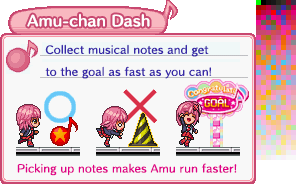
<style>
.page{position:relative;width:296px;height:192px;background:#f8f8f8}
.page>*{position:absolute;margin:0}
.t1{font:14px "HummingStd-B";letter-spacing:0.02em;color:#ffffff}
.t2{font:10px/22px "HummingStd-D";letter-spacing:0.02em;color:#3828a8}
.t3{font:10px "HummingStd-D";letter-spacing:0.02em;color:#e00088}
</style>
<div class="page">
<p class="t1" style="left:27px;top:13px;width:123px;height:14px">Amu-chan Dash</p>
<p class="t2" style="left:45px;top:44px;width:167px;height:35px">Collect musical notes and get<br>to the goal as fast as you can!</p>
<p class="t3" style="left:17px;top:163px;width:220px;height:13px">Picking up notes makes Amu run faster!</p>
</div>
